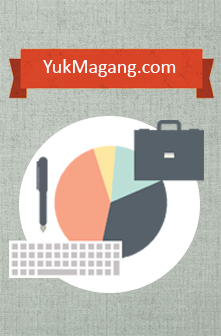
<style>
.page{position:relative;width:221px;height:336px}
.page>*{position:absolute;margin:0}
.t1{font:20px "Calibri";color:#fefefe}
</style>
<div class="page">
<p class="t1" style="left:43px;top:59px;width:133px;height:18px">YukMagang.com</p>
</div>
